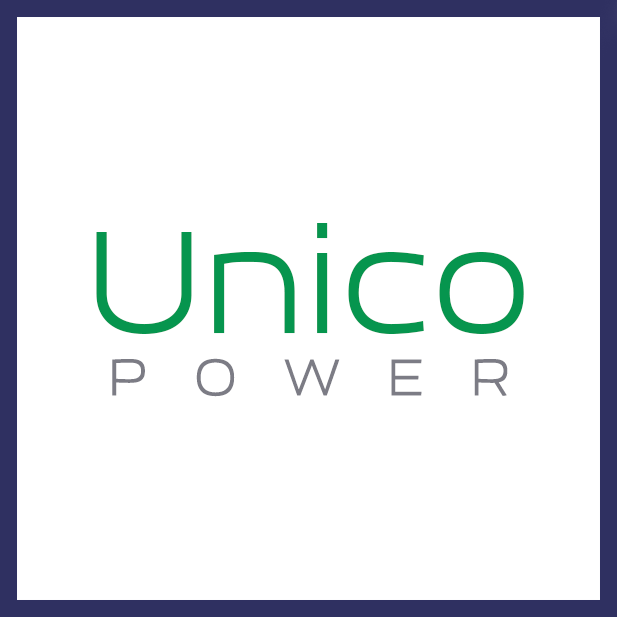
<style>
.page{position:relative;width:617px;height:617px;background:#ffffff}
.page>*{position:absolute;margin:0}
.t1{font:141.7px "EsqaderoFFCY4F";color:#06954d}
.t2{font:50px "EsqaderoFFCY4F";letter-spacing:0.9em;color:#7c7c85}
</style>
<div class="page">
<p class="t1" style="left:96px;top:223px;width:428px;height:111px">Unico</p>
<p class="t2" style="left:112px;top:358px;width:396px;height:39px">POWER</p>
</div>
